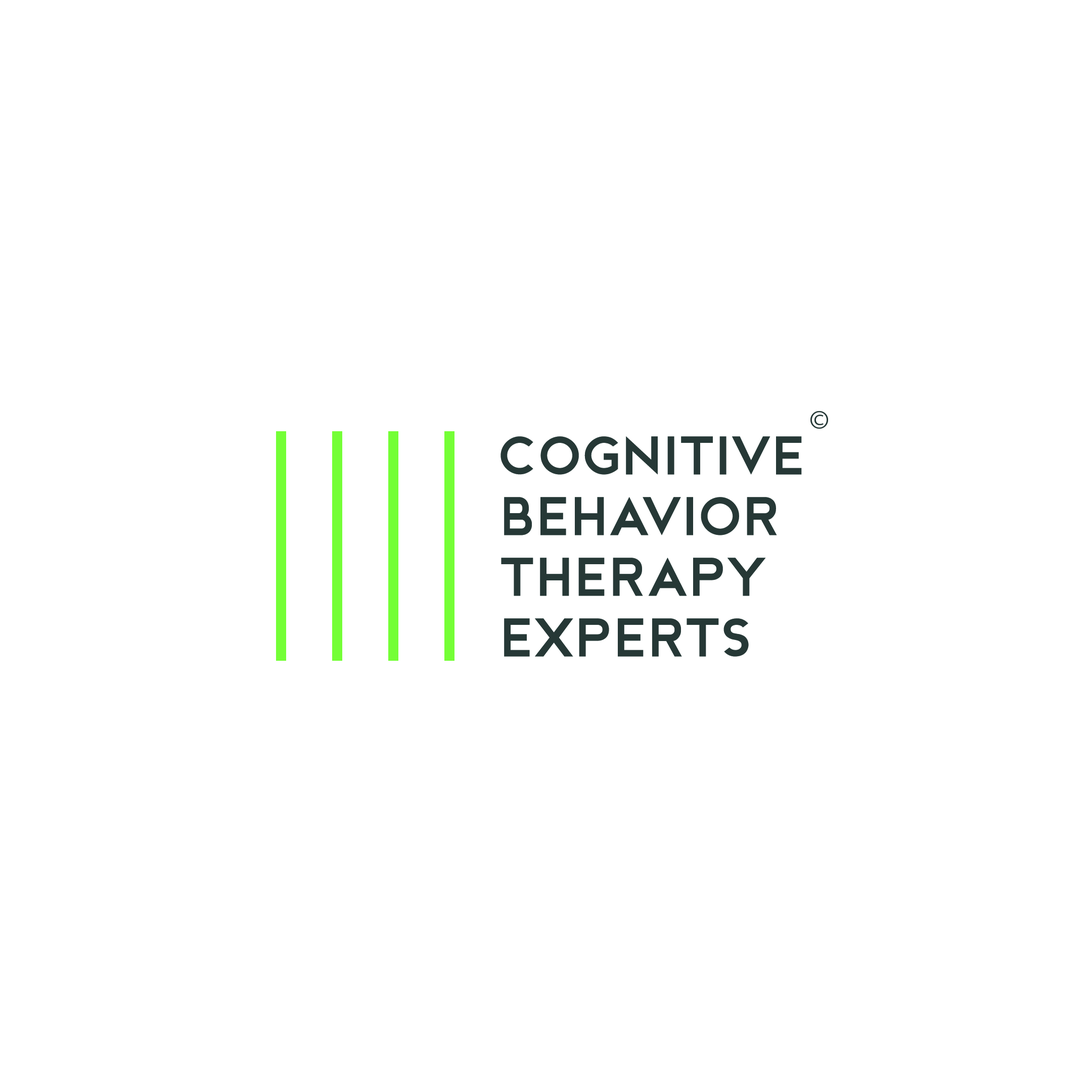
<style>
.page{position:relative;width:1092px;height:1092px;background:#ffffff}
.page>*{position:absolute;margin:0}
.t1{font:50.6px "MeedoriSansBold";letter-spacing:-0.01em;color:#263836}
</style>
<div class="page">
<p class="t1" style="left:500px;top:436px;width:302px;height:221px">Cognitive<br>behavior<br>therapy<br>experts</p>
</div>
